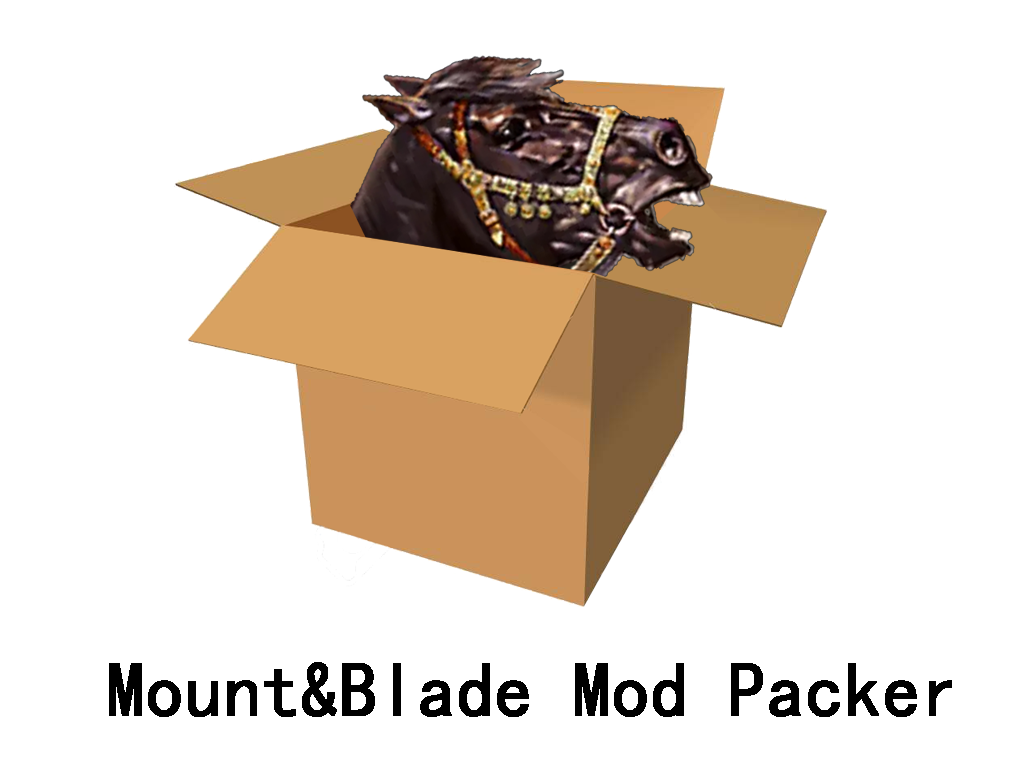
<style>
.page{position:relative;width:1024px;height:768px;background:#ffffff}
.page>*{position:absolute;margin:0}
.t1{font:79.2px "SimHei";color:#000000;font-weight:bold;scale:0.93 1}
</style>
<div class="page">
<p class="t1" style="left:109px;top:662px;width:843px;height:55px">Mount&amp;Blade Mod Packer</p>
</div>
